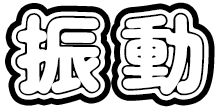
<style>
.page{position:relative;width:220px;height:108px;background:#ffffff}
.page>*{position:absolute;margin:0}
.t1{font:100px "DokiDokiFantasia";letter-spacing:0.05em;color:#ffffff}
</style>
<div class="page">
<p class="t1" style="left:11px;top:8px;width:198px;height:93px">振動</p>
</div>
